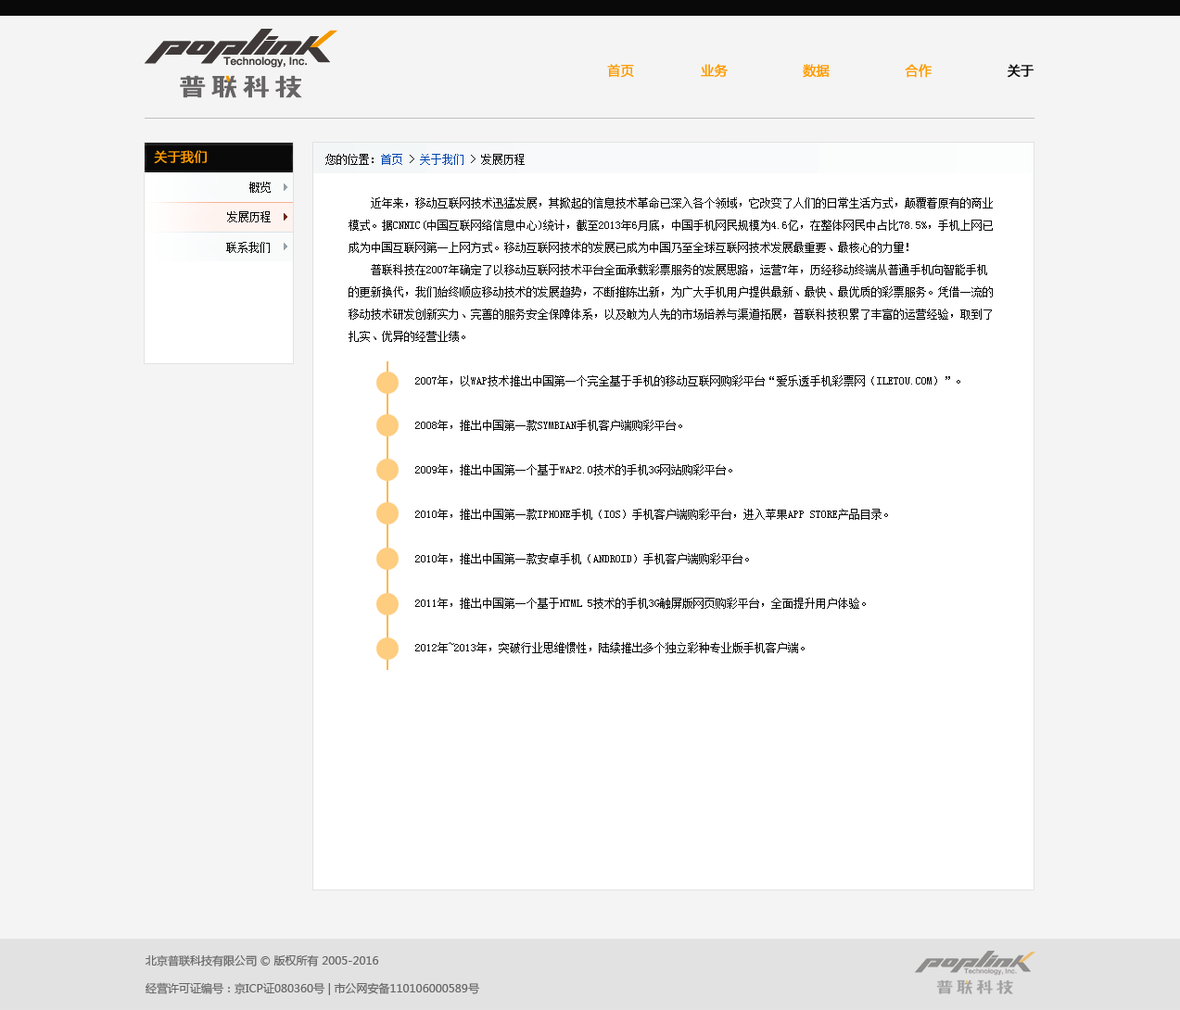
<style>
.page{position:relative;width:1180px;height:1010px;background:#f4f4f4}
.page>*{position:absolute;margin:0}
.t1{font:13px "MicrosoftYaHei";color:#fe9b00;text-transform:uppercase;font-weight:bold}
.t2{font:13px "MicrosoftYaHei";color:#090909;text-transform:uppercase;font-weight:bold}
.t3{font:13px "MicrosoftYaHei";color:#fe9b00;font-weight:bold}
.t4{font:11.1px "SimSun";color:#090909;text-transform:uppercase}
.t5{font:11.1px "SimSun";color:#0146af;text-transform:uppercase}
.t6{font:11.1px/44.5px "SimSun";color:#090909;text-transform:uppercase}
.t7{font:11.1px/22.2px "SimSun";color:#090909;text-transform:uppercase}
.t8{font:11.1px/27.8px "MicrosoftYaHei";color:#666666}
</style>
<div class="page">
<p class="t1" style="left:607px;top:64px;width:427px;height:14px">首页                业务                  数据                  合作                  <span class="t2">关于</span></p>
<p class="t3" style="left:154px;top:150px;width:53px;height:14px">关于我们</p>
<p class="t4" style="left:325px;top:154px;width:200px;height:11px">您的位置：<span class="t5">首页 </span>&gt; <span class="t5">关于我们 </span>&gt; 发展历程</p>
<p class="t4" style="left:249px;top:182px;width:22px;height:11px">概览</p>
<p class="t6" style="left:349px;top:197px;width:644px;height:457px"><span class="t7">    近年来，移动互联网技术迅猛发展，其掀起的信息技术革命已深入各个领域，它改变了人们的日常生活方式，颠覆着原有的商业<br>模式。据CNNIC(中国互联网络信息中心)统计，截至2013年6月底，中国手机网民规模为4.6亿，在整体网民中占比78.5%，手机上网已<br>成为中国互联网第一上网方式。移动互联网技术的发展已成为中国乃至全球互联网技术发展最重要、最核心的力量！<br>    普联科技在2007年确定了以移动互联网技术平台全面承载彩票服务的发展思路，运营7年，历经移动终端从普通手机向智能手机<br>的更新换代，我们始终顺应移动技术的发展趋势，不断推陈出新，为广大手机用户提供最新、最快、最优质的彩票服务。凭借一流的<br>移动技术研发创新实力、完善的服务安全保障体系，以及敢为人先的市场培养与渠道拓展，普联科技积累了丰富的运营经验，取到了<br>扎实、优异的经营业绩。</span><br>            2007年，以WAP技术推出中国第一个完全基于手机的移动互联网购彩平台“爱乐透手机彩票网（iletou.com）”。<br>            2008年，推出中国第一款Symbian手机客户端购彩平台。<br>            2009年，推出中国第一个基于WAP2.0技术的手机3G网站购彩平台。<br>            2010年，推出中国第一款IPhone手机（IOS）手机客户端购彩平台，进入苹果App Store产品目录。<br>            2010年，推出中国第一款安卓手机（Android）手机客户端购彩平台。<br>            2011年，推出中国第一个基于Html 5技术的手机3G触屏版网页购彩平台，全面提升用户体验。<br>            2012年~2013年，突破行业思维惯性，陆续推出多个独立彩种专业版手机客户端。</p>
<p class="t4" style="left:227px;top:211px;width:44px;height:11px">发展历程</p>
<p class="t4" style="left:226px;top:242px;width:44px;height:11px">联系我们</p>
<p class="t8" style="left:146px;top:955px;width:334px;height:41px">北京普联科技有限公司 © 版权所有 2005-2016<br>经营许可证编号：京ICP证080360号 | 市公网安备110106000589号</p>
</div>
